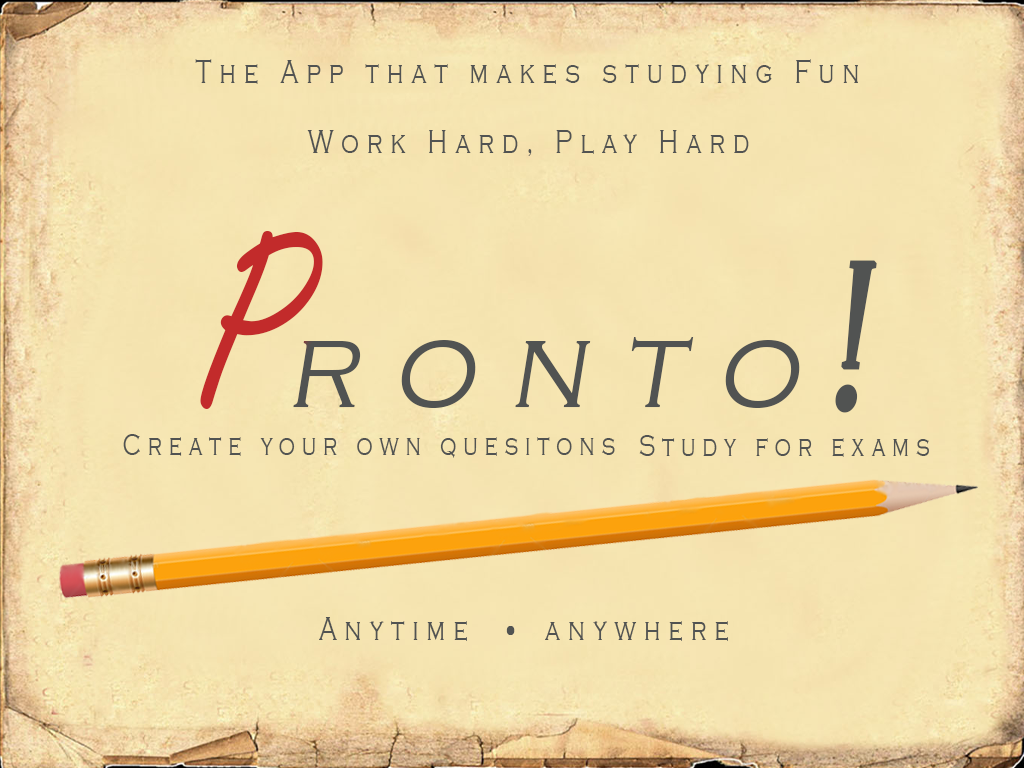
<style>
.page{position:relative;width:1024px;height:768px}
.page>*{position:absolute;margin:0}
.t1{font:34.4px "CopperplateGothic-Light";letter-spacing:0.32em;color:#515352;scale:0.71 1}
.t2{font:121px "CopperplateGothic-Light";letter-spacing:0.32em;color:#515352;font-style:italic;scale:0.91 1}
.t3{font:267.2px "FreestyleScript-Regular";letter-spacing:-0.06em;color:#515352;scale:0.87 1}
.t4{font:121px "CopperplateGothic-Light";letter-spacing:0.18em;color:#515352;font-style:italic;scale:0.91 1}
.t5{font:215.8px "CopperplateGothic-Light";letter-spacing:0.32em;color:#515352;font-weight:bold;font-style:italic;scale:0.71 1}
.t6{font:30.6px "CopperplateGothic-Light";letter-spacing:0.32em;color:#515352;scale:0.71 1}
.t7{font:78.3px "CopperplateGothic-Light";letter-spacing:0.32em;color:#515352;font-weight:bold;scale:0.71 1}
</style>
<div class="page">
<p class="t1" style="left:195px;top:59px;width:663px;height:25px">The App that makes studying Fun</p>
<p class="t1" style="left:307px;top:130px;width:442px;height:26px">Work Hard, Play Hard</p>
<p class="t2" style="left:200px;top:231px;width:677px;height:182px"><span class="t3">P</span>ront<span class="t4">o</span><span class="t5">!</span></p>
<p class="t6" style="left:123px;top:434px;width:492px;height:24px">Create your own quesitons</p>
<p class="t6" style="left:639px;top:435px;width:290px;height:22px">Study for exams</p>
<p class="t1" style="left:319px;top:617px;width:409px;height:24px">Anytime <span class="t7">. </span>anywhere</p>
</div>
